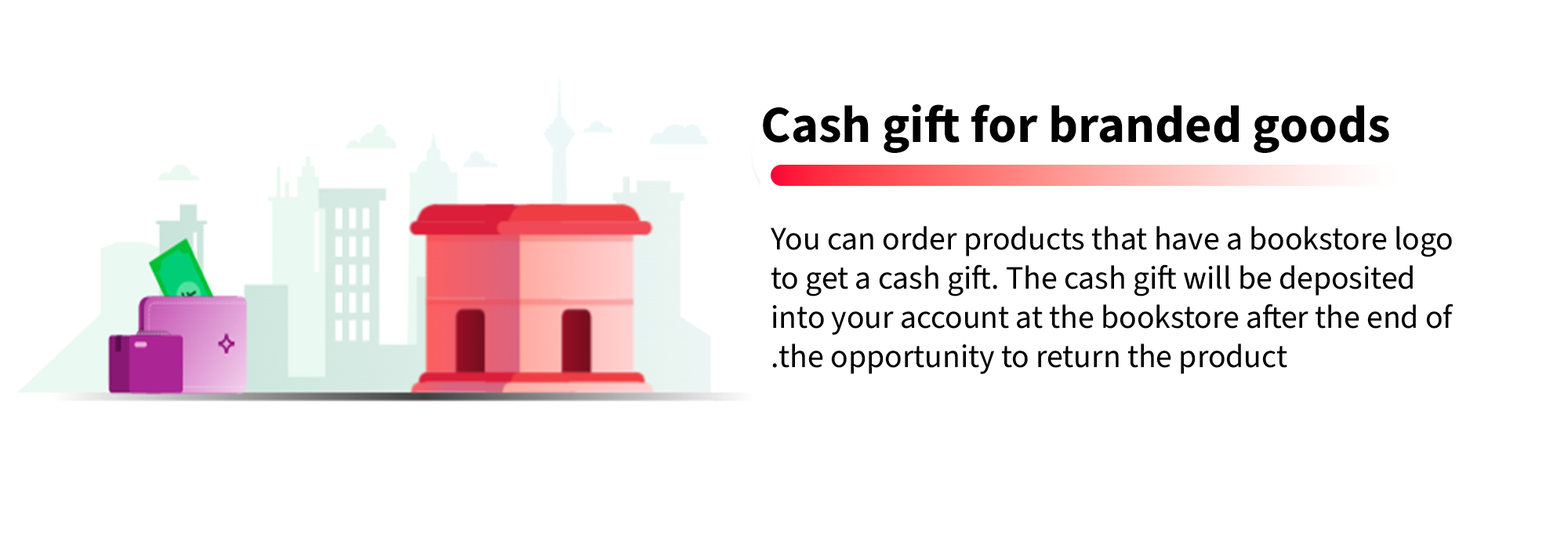
<style>
.page{position:relative;width:1568px;height:549px;background:#ffffff}
.page>*{position:absolute;margin:0}
.t1{font:52.3px "SourceSans3Roman-Bold";color:#000000}
.t2{font:32.7px "SourceSans3Roman-Regular";color:#000000}
</style>
<div class="page">
<p class="t1" style="left:763px;top:103px;width:626px;height:50px">Cash gift for branded goods</p>
<p class="t2" style="left:771px;top:226px;width:683px;height:148px;text-align:right">You can order products that have a bookstore logo to get a cash gift. The cash gift will be deposited into your account at the bookstore after the end of the opportunity to return the product.</p>
</div>
